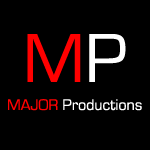
<style>
.page{position:relative;width:150px;height:150px;background:#000000}
.page>*{position:absolute;margin:0}
.t1{font:72px "EurostileRegular";color:#ff0000}
.t2{font:72px "EurostileRegular";color:#ffffff}
.t3{font:16px "EurostileRegular";color:#ffffff}
.t4{font:16px "EurostileRegular";color:#ff0000}
</style>
<div class="page">
<p class="t1" style="left:27px;top:34px;width:99px;height:48px">M<span class="t2">P</span></p>
<p class="t3" style="left:8px;top:99px;width:134px;height:12px"><span class="t4">MAJOR </span>Productions</p>
</div>
